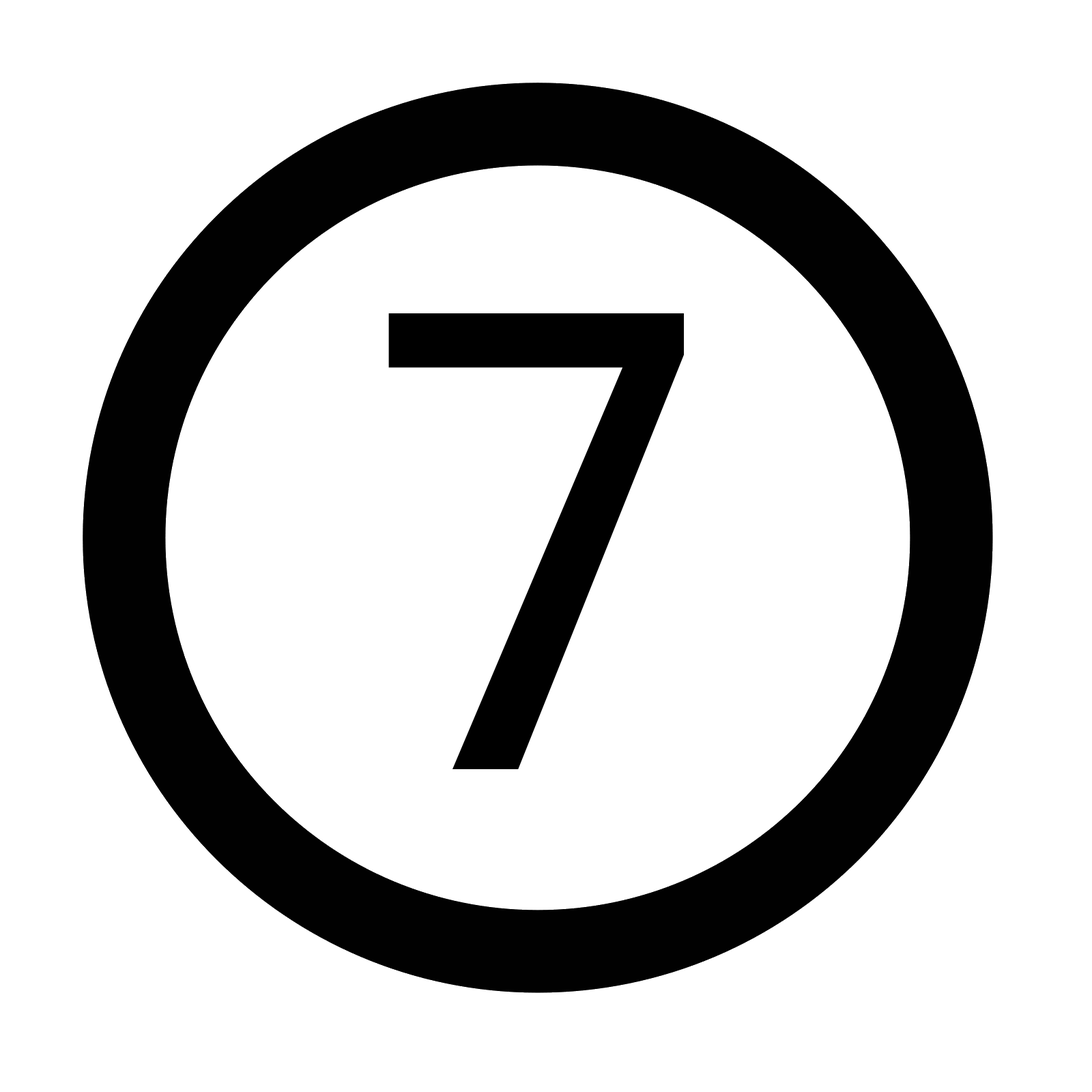
<style>
.page{position:relative;width:1092px;height:1092px;background:#ffffff}
.page>*{position:absolute;margin:0}
.t1{font:637px "MicrosoftSansSerif";color:#000000}
</style>
<div class="page">
<p class="t1" style="left:388px;top:313px;width:296px;height:456px">7</p>
</div>
